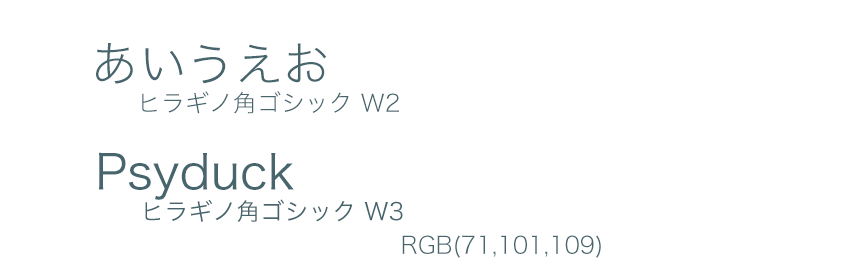
<style>
.page{position:relative;width:865px;height:280px;background:#ffffff}
.page>*{position:absolute;margin:0}
.t1{font:48px "HiraginoSans-W2";color:#47656d}
.t2{font:24px "HiraginoSans-W2";color:#47656d}
.t3{font:48px "HiraginoSans-W3";color:#47656d}
.t4{font:24px "HiraginoSans-W3";color:#47656d}
</style>
<div class="page">
<p class="t1" style="left:96px;top:43px;width:231px;height:41px">あいうえお</p>
<p class="t2" style="left:142px;top:91px;width:257px;height:23px">ヒラギノ角ゴシック W2</p>
<p class="t3" style="left:99px;top:152px;width:195px;height:48px">Psyduck</p>
<p class="t4" style="left:145px;top:199px;width:258px;height:23px">ヒラギノ角ゴシック W3</p>
<p class="t2" style="left:402px;top:235px;width:199px;height:23px">RGB(71,101,109)</p>
</div>
